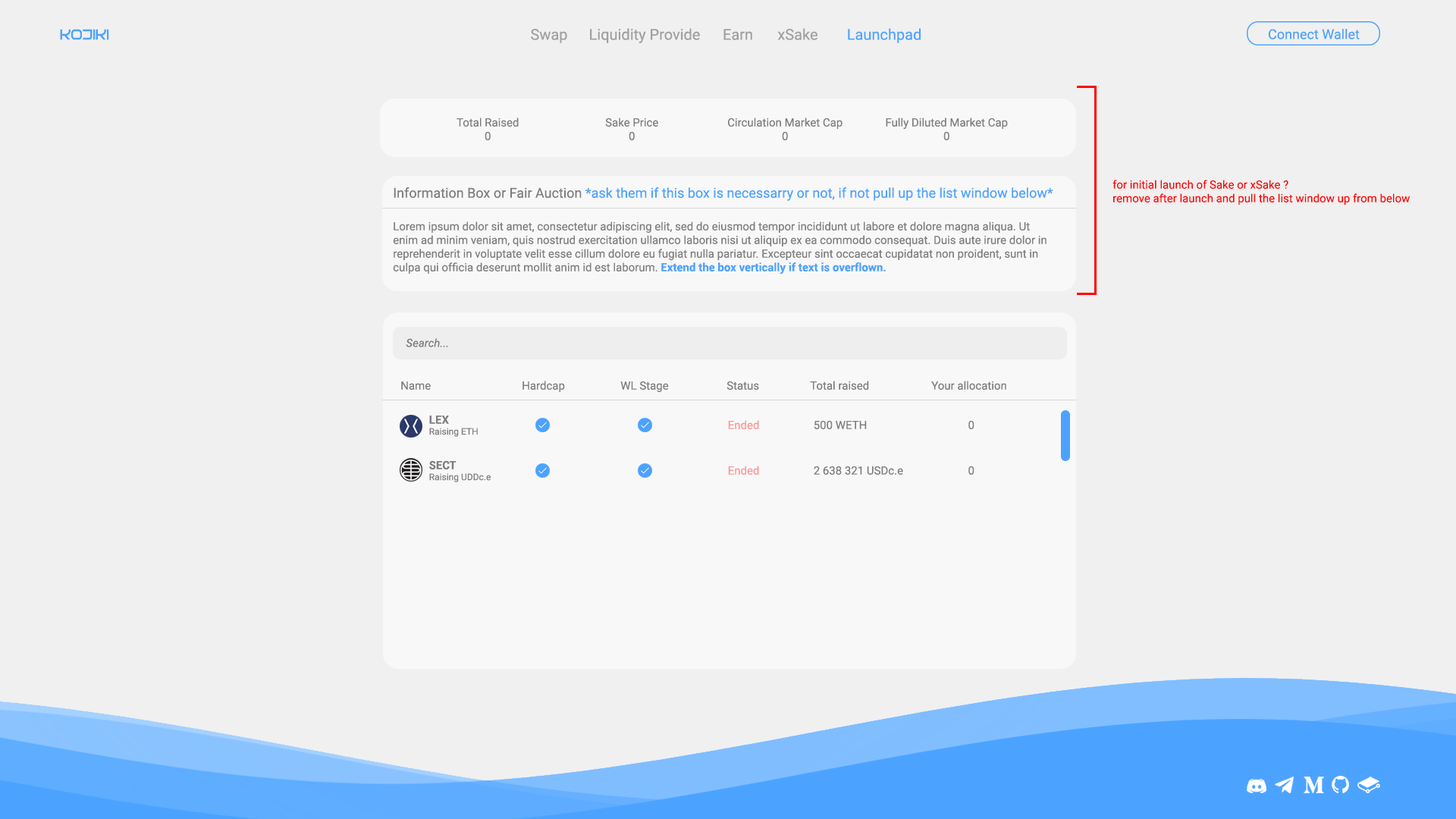
<style>
.page{position:relative;width:1456px;height:819px;background:#f0f0f0}
.page>*{position:absolute;margin:0}
.t1{font:15.2px "Prefectures-Regular";color:#4ca3ff}
.t2{font:15.2px "Roboto-Regular";color:#a0a0a0}
.t3{font:15.2px "Roboto-Regular";color:#4ca3ff}
.t4{font:13.6px "Roboto-Regular";color:#4ca3ff}
.t5{font:11.4px "Roboto-Regular";color:#7e7e7e}
.t6{font:11.4px "Roboto-Regular";color:#ff0000}
.t7{font:13.6px "Roboto-Regular";color:#7e7e7e}
.t8{font:11.4px "Roboto-Bold";color:#4ca3ff}
.t9{font:11.4px "Roboto-Italic";color:#7e7e7e}
.t10{font:9.1px "Roboto-Regular";color:#7e7e7e}
.t11{font:11.4px "Roboto-Bold";color:#7e7e7e}
.t12{font:11.4px "Roboto-Regular";color:#fe9595}
</style>
<div class="page">
<p class="t1" style="left:60px;top:29px;width:49px;height:11px">KOJIKI</p>
<p class="t2" style="left:531px;top:29px;width:36px;height:14px">Swap</p>
<p class="t2" style="left:590px;top:28px;width:110px;height:15px">Liquidity Provide</p>
<p class="t2" style="left:723px;top:29px;width:29px;height:11px">Earn</p>
<p class="t2" style="left:777px;top:28px;width:40px;height:12px">xSake</p>
<p class="t3" style="left:848px;top:28px;width:73px;height:15px">Launchpad</p>
<p class="t4" style="left:1269px;top:29px;width:91px;height:10px">Connect Wallet</p>
<p class="t5" style="left:457px;top:118px;width:62px;height:22px;text-align:center">Total Raised<br>0</p>
<p class="t5" style="left:605px;top:118px;width:53px;height:22px;text-align:center">Sake Price<br>0</p>
<p class="t5" style="left:728px;top:118px;width:114px;height:22px;text-align:center">Circulation Market Cap<br>0</p>
<p class="t5" style="left:886px;top:118px;width:122px;height:22px;text-align:center">Fully Diluted Market Cap<br>0</p>
<p class="t6" style="left:1112px;top:180px;width:298px;height:25px">for initial launch of Sake or xSake ?<br>remove after launch and pull the list window up from below</p>
<p class="t4" style="left:394px;top:187px;width:659px;height:14px"><span class="t7">Information Box or Fair Auction </span>*ask them if this box is necessarry or not, if not pull up the list window below*</p>
<p class="t5" style="left:393px;top:221px;width:653px;height:53px">Lorem ipsum dolor sit amet, consectetur adipiscing elit, sed do eiusmod tempor incididunt ut labore et dolore magna aliqua. Ut <br>enim ad minim veniam, quis nostrud exercitation ullamco laboris nisi ut aliquip ex ea commodo consequat. Duis aute irure dolor in <br>reprehenderit in voluptate velit esse cillum dolore eu fugiat nulla pariatur. Excepteur sint occaecat cupidatat non proident, sunt in <br>culpa qui officia deserunt mollit anim id est laborum. <span class="t8">Extend the box vertically if text is overflown.</span></p>
<p class="t9" style="left:406px;top:338px;width:42px;height:9px">Search...</p>
<p class="t5" style="left:401px;top:381px;width:30px;height:9px">Name</p>
<p class="t5" style="left:522px;top:381px;width:43px;height:11px">Hardcap</p>
<p class="t5" style="left:620px;top:381px;width:49px;height:11px">WL Stage</p>
<p class="t5" style="left:726px;top:381px;width:33px;height:9px">Status</p>
<p class="t5" style="left:810px;top:381px;width:59px;height:9px">Total raised</p>
<p class="t5" style="left:931px;top:381px;width:75px;height:9px">Your allocation</p>
<p class="t10" style="left:429px;top:416px;width:49px;height:21px"><span class="t11">LEX<br></span>Raising ETH</p>
<p class="t12" style="left:728px;top:420px;width:31px;height:9px">Ended</p>
<p class="t5" style="left:814px;top:420px;width:53px;height:9px">500 WETH</p>
<p class="t5" style="left:968px;top:420px;width:6px;height:9px">0</p>
<p class="t10" style="left:429px;top:460px;width:62px;height:22px"><span class="t11">SECT<br></span>Raising UDDc.e</p>
<p class="t12" style="left:728px;top:466px;width:31px;height:9px">Ended</p>
<p class="t5" style="left:814px;top:466px;width:89px;height:9px">2 638 321 USDc.e</p>
<p class="t5" style="left:968px;top:466px;width:6px;height:9px">0</p>
</div>
